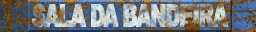
<style>
.page{position:relative;width:256px;height:32px}
.page>*{position:absolute;margin:0}
.t1{font:30.7px "Arial-Black";letter-spacing:-0.08em;text-transform:uppercase;font-weight:bold;scale:0.63 1}
</style>
<div class="page">
<p class="t1" style="left:32px;top:3px;width:197px;height:25px">sala da bandeira</p>
</div>
